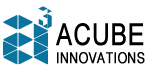
<style>
.page{position:relative;width:163px;height:70px;background:#ffffff}
.page>*{position:absolute;margin:0}
.t1{font:40px "Nimrodel-FS";color:#0b749e;font-weight:bold}
.t2{font:140px "Nimrodel-FS";color:#0b749e;font-weight:bold}
.t3{font:30px "ArialNarrow";color:#000000;font-weight:bold}
.t4{font:15px "ArialNarrow";color:#000000;font-weight:bold}
</style>
<div class="page">
<p class="t1" style="left:38px;top:6px;width:14px;height:23px">3</p>
<p class="t2" style="left:3px;top:15px;width:45px;height:50px">a</p>
<p class="t3" style="left:56px;top:23px;width:88px;height:23px">ACUBE</p>
<p class="t4" style="left:57px;top:52px;width:88px;height:12px">INNOVATIONS</p>
</div>
